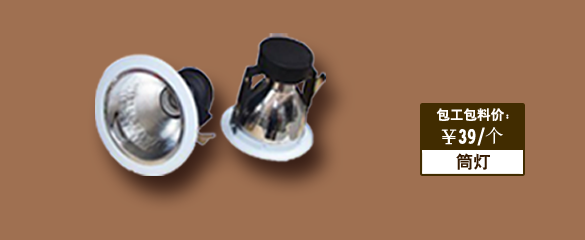
<style>
.page{position:relative;width:585px;height:240px;background:#9f7051}
.page>*{position:absolute;margin:0}
.t1{font:13.5px "HeitiCSEG";color:#fffefe}
.t2{font:18.1px "HeitiCSEG";color:#ffffff}
.t3{font:18.1px "SimSun";color:#ffffff}
.t4{font:17.4px "HeitiCSEG";color:#361a00}
</style>
<div class="page">
<p class="t1" style="left:436px;top:108px;width:73px;height:13px">包工包料价：</p>
<p class="t2" style="left:441px;top:127px;width:62px;height:19px">￥39/<span class="t3">个</span></p>
<p class="t4" style="left:456px;top:153px;width:34px;height:17px">筒灯</p>
</div>
